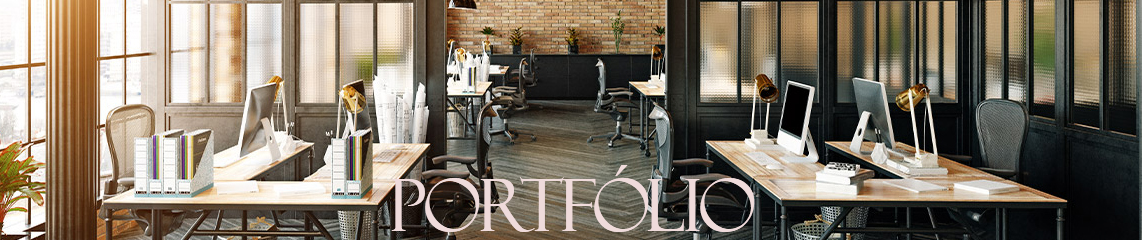
<style>
.page{position:relative;width:1142px;height:240px}
.page>*{position:absolute;margin:0}
.t1{font:72px "FelixTitlingMT";letter-spacing:-0.05em;color:#efdbdb}
</style>
<div class="page">
<p class="t1" style="left:391px;top:165px;width:364px;height:67px">PORTFÓLIO</p>
</div>
